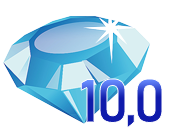
<style>
.page{position:relative;width:175px;height:133px;background:#ffffff}
.page>*{position:absolute;margin:0}
.t1{font:60px "Bahnschrift-SemiBold";letter-spacing:-0.05em}
</style>
<div class="page">
<p class="t1" style="left:81px;top:79px;width:81px;height:49px">10,0</p>
</div>
